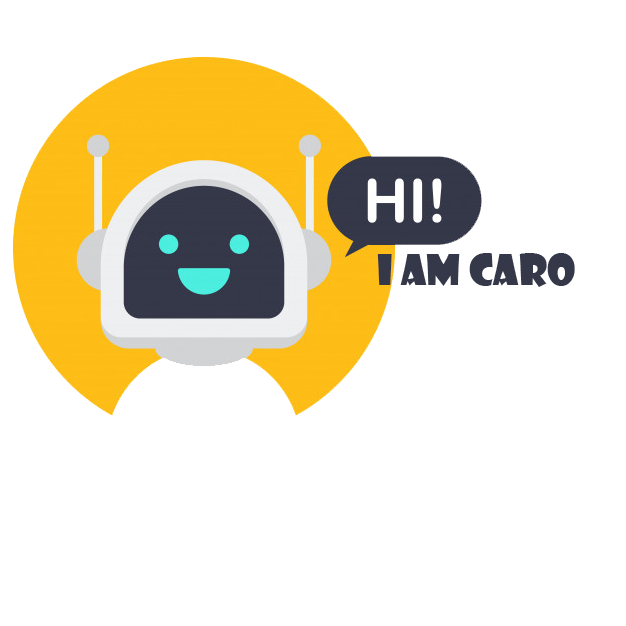
<style>
.page{position:relative;width:626px;height:626px;background:#ffffff}
.page>*{position:absolute;margin:0}
.t1{font:41.3px "ShowcardGothic-Reg";color:#353849}
</style>
<div class="page">
<p class="t1" style="left:377px;top:253px;width:198px;height:34px">I am Caro</p>
</div>
